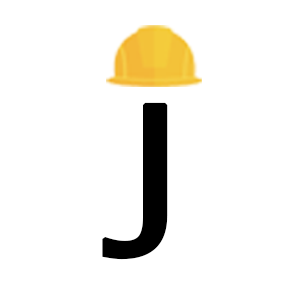
<style>
.page{position:relative;width:300px;height:300px;background:#ffffff}
.page>*{position:absolute;margin:0}
.t1{font:176.2px "LucidaSansUnicode";letter-spacing:-0.03em;color:#000000;font-weight:bold;scale:1.11 1}
</style>
<div class="page">
<p class="t1" style="left:102px;top:102px;width:66px;height:158px">J</p>
</div>
